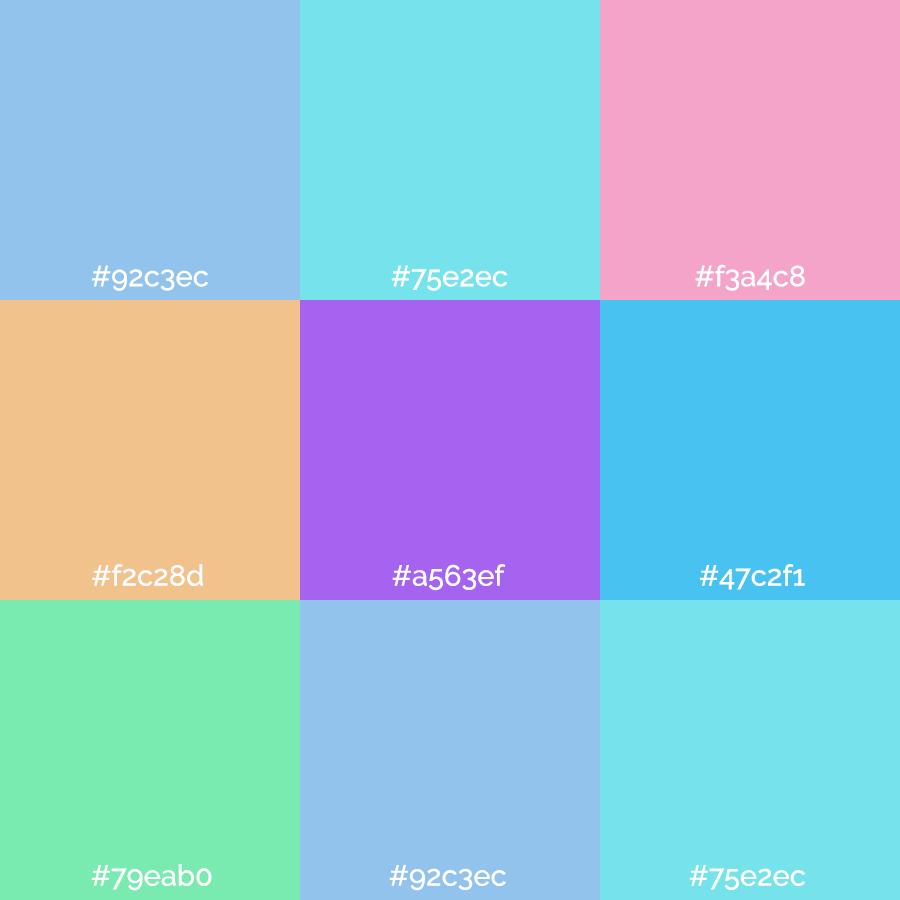
<style>
.page{position:relative;width:900px;height:900px;background:#92c3ec}
.page>*{position:absolute;margin:0}
.t1{font:29.1px "Raleway-Medium";color:#ffffff}
</style>
<div class="page">
<p class="t1" style="left:92px;top:265px;width:116px;height:26px">#92c3ec</p>
<p class="t1" style="left:391px;top:265px;width:117px;height:26px">#75e2ec</p>
<p class="t1" style="left:695px;top:264px;width:110px;height:27px">#f3a4c8</p>
<p class="t1" style="left:92px;top:564px;width:111px;height:22px">#f2c28d</p>
<p class="t1" style="left:392px;top:564px;width:114px;height:27px">#a563ef</p>
<p class="t1" style="left:700px;top:564px;width:105px;height:26px">#47c2f1</p>
<p class="t1" style="left:91px;top:864px;width:121px;height:27px">#79eab0</p>
<p class="t1" style="left:389px;top:865px;width:117px;height:26px">#92c3ec</p>
<p class="t1" style="left:689px;top:865px;width:117px;height:25px">#75e2ec</p>
</div>
